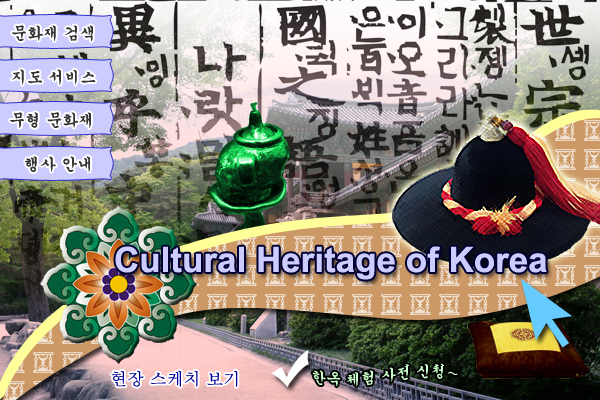
<style>
.page{position:relative;width:600px;height:400px}
.page>*{position:absolute;margin:0}
.t1{font:16px "Gungsuh";color:#333333}
.t2{font:35px "Arial-BoldMT";color:#ccccff}
.t3{font:15px "Gungsuh";color:#ccffcc}
.t4{font:15px "Dotum";color:#ccffcc}
.t5{font:17px "Batang";color:#000099}
</style>
<div class="page">
<p class="t1" style="left:12px;top:25px;width:81px;height:17px">문화재 검색</p>
<p class="t1" style="left:11px;top:69px;width:85px;height:16px">지도 서비스</p>
<p class="t1" style="left:10px;top:112px;width:81px;height:17px">무형 문화재</p>
<p class="t1" style="left:25px;top:156px;width:65px;height:16px">행사 안내</p>
<p class="t2" style="left:115px;top:246px;width:432px;height:34px">Cultural Heritage of Korea</p>
<p class="t3" style="left:312px;top:363px;width:146px;height:24px">한옥 체험 사전 신청<span class="t4">~</span></p>
<p class="t5" style="left:111px;top:370px;width:127px;height:17px">현장 스케치 보기</p>
</div>
